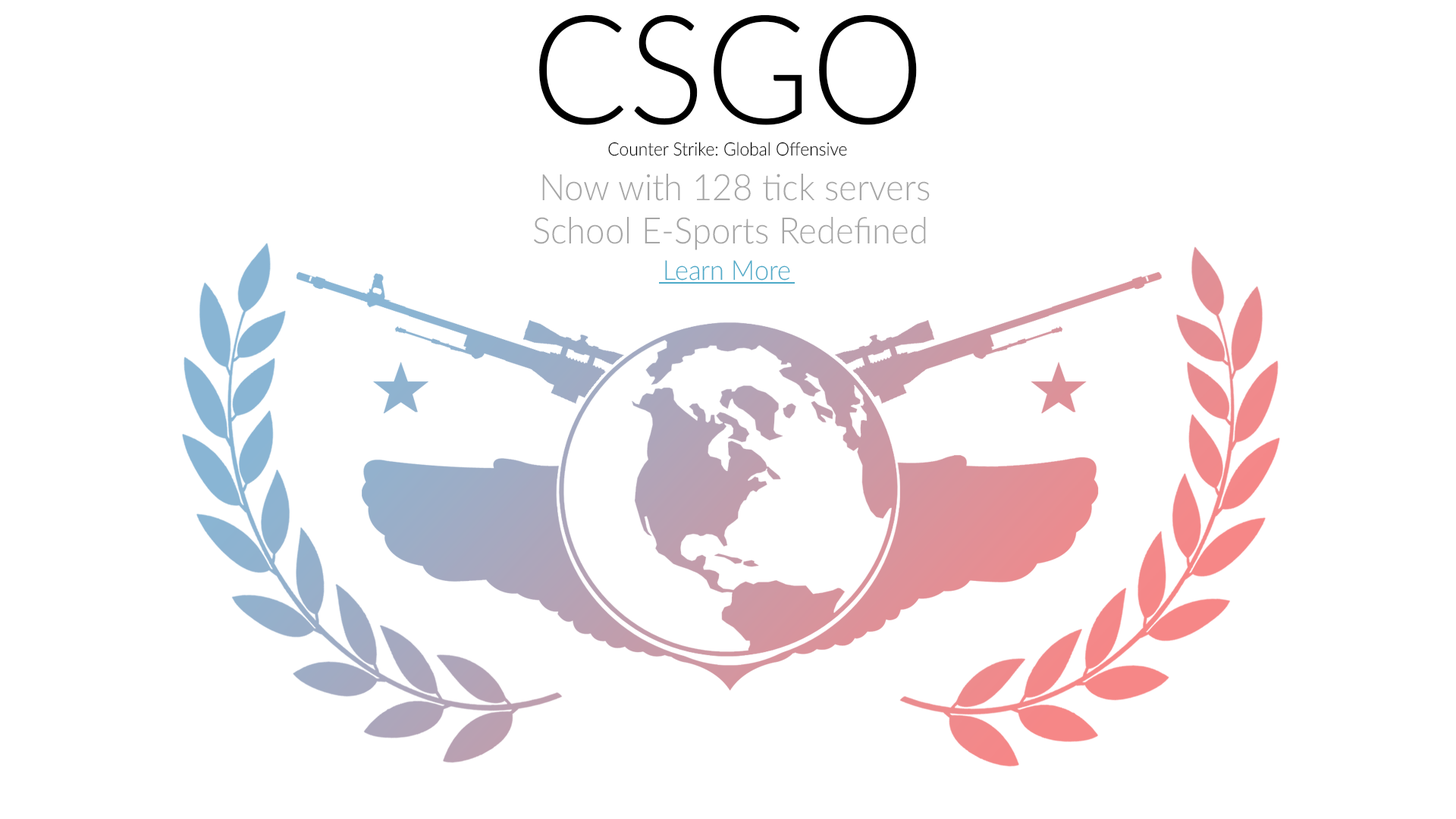
<style>
.page{position:relative;width:1456px;height:819px;background:#ffffff}
.page>*{position:absolute;margin:0}
.t1{font:151.7px "Lato-Light";color:#000000;scale:0.95 1}
.t2{font:18.2px "Lato-Light";color:#010101;scale:0.95 1}
.t3{font:36.4px "Lato-Light";color:#a6a6a6;scale:0.95 1}
.t4{font:27.3px "Lato-Light";color:#4daac8;scale:0.95 1}
</style>
<div class="page">
<p class="t1" style="left:539px;top:14px;width:378px;height:111px">CSGO</p>
<p class="t2" style="left:608px;top:142px;width:239px;height:14px">Counter Strike: Global Offensive</p>
<p class="t3" style="left:534px;top:174px;width:396px;height:76px;text-align:center">Now with 128 tick servers<br>School E-Sports Redefined</p>
<p class="t4" style="left:665px;top:260px;width:125px;height:21px">Learn More</p>
</div>
